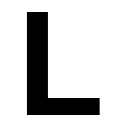
<style>
.page{position:relative;width:128px;height:128px;background:#ffffff}
.page>*{position:absolute;margin:0}
.t1{font:144px "Arial-BoldMT";color:#000000}
</style>
<div class="page">
<p class="t1" style="left:26px;top:12px;width:74px;height:103px">L</p>
</div>
